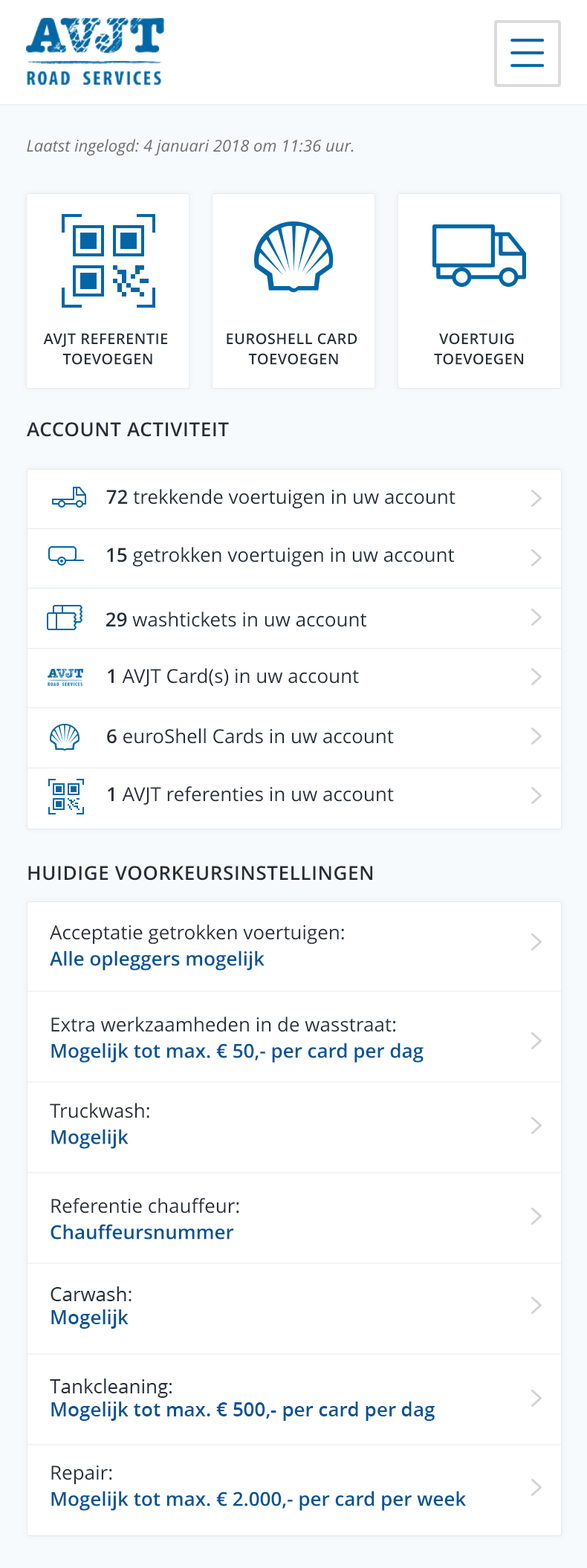
<style>
.page{position:relative;width:587px;height:1568px;background:#ffffff}
.page>*{position:absolute;margin:0}
.t1{font:16.3px "OpenSans-Italic";color:#6d6d6d}
.t2{font:14.9px "OpenSans-Semibold";letter-spacing:0.023em;color:#262d37;text-transform:uppercase}
.t3{font:19.3px "OpenSans-Semibold";letter-spacing:0.023em;color:#262d37;text-transform:uppercase}
.t4{font:19.3px "OpenSans";color:#262d37}
.t5{font:19.3px "OpenSans-Semibold";color:#262d37}
.t6{font:19.3px "OpenSans-Semibold";color:#005396}
</style>
<div class="page">
<p class="t1" style="left:27px;top:139px;width:327px;height:17px">Laatst ingelogd: 4 januari 2018 om 11:36 uur.</p>
<p class="t2" style="left:43px;top:333px;width:125px;height:32px;text-align:center">AVJT referentie <br>toevoegen</p>
<p class="t2" style="left:227px;top:333px;width:130px;height:32px;text-align:center">EuroShell Card <br>Toevoegen</p>
<p class="t2" style="left:434px;top:333px;width:90px;height:32px;text-align:center">Voertuig <br>Toevoegen</p>
<p class="t3" style="left:27px;top:422px;width:202px;height:15px">Account Activiteit</p>
<p class="t4" style="left:106px;top:489px;width:350px;height:20px"><span class="t5">72</span> trekkende voertuigen in uw account</p>
<p class="t4" style="left:106px;top:547px;width:349px;height:20px"><span class="t5">15 </span>getrokken voertuigen in uw account</p>
<p class="t4" style="left:106px;top:612px;width:261px;height:15px"><span class="t5">29</span> washtickets in uw account</p>
<p class="t4" style="left:107px;top:668px;width:252px;height:19px"><span class="t5">1 </span>AVJT Card(s) in uw account</p>
<p class="t4" style="left:107px;top:728px;width:287px;height:16px"><span class="t5">6</span> euroShell Cards in uw account</p>
<p class="t4" style="left:107px;top:786px;width:287px;height:19px"><span class="t5">1</span> AVJT referenties in uw account</p>
<p class="t3" style="left:28px;top:866px;width:345px;height:15px">Huidige Voorkeursinstellingen</p>
<p class="t4" style="left:50px;top:924px;width:294px;height:47px">Acceptatie getrokken voertuigen:<br><span class="t6">Alle opleggers mogelijk</span></p>
<p class="t6" style="left:51px;top:1017px;width:373px;height:46px"><span class="t4">Extra werkzaamheden in de wasstraat:<br></span>Mogelijk tot max. € 50,- per card per dag</p>
<p class="t4" style="left:50px;top:1103px;width:99px;height:46px">Truckwash:<br><span class="t6">Mogelijk</span></p>
<p class="t4" style="left:51px;top:1198px;width:188px;height:42px">Referentie chauffeur:<br><span class="t6">Chauffeursnummer</span></p>
<p class="t4" style="left:51px;top:1286px;width:81px;height:43px">Carwash: <br><span class="t6">Mogelijk</span></p>
<p class="t6" style="left:50px;top:1379px;width:385px;height:42px"><span class="t4">Tankcleaning: <br></span>Mogelijk tot max. € 500,- per card per dag</p>
<p class="t6" style="left:51px;top:1465px;width:416px;height:46px"><span class="t4">Repair:<br></span>Mogelijk tot max. € 2.000,- per card per week</p>
</div>
